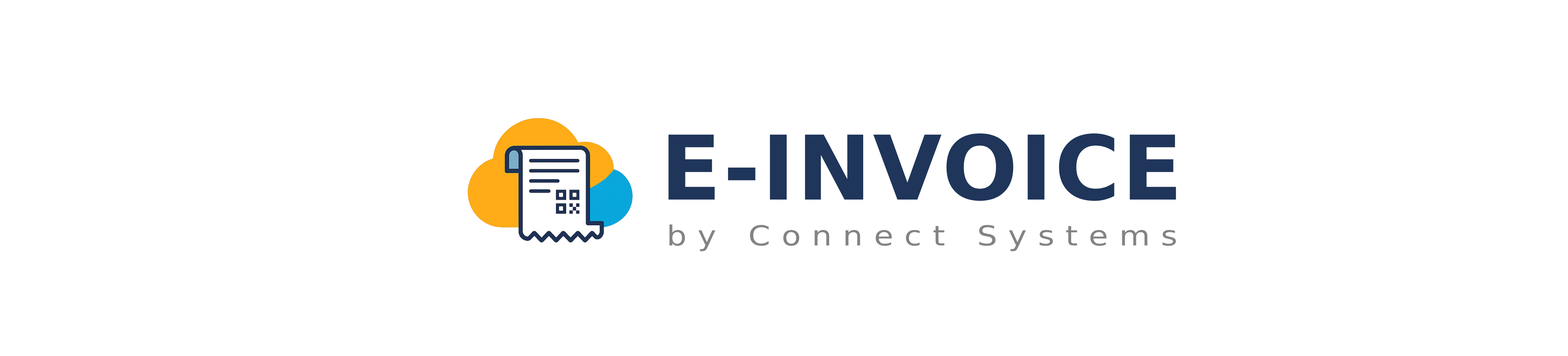
<style>
.page{position:relative;width:1568px;height:356px;background:#ffffff}
.page>*{position:absolute;margin:0}
.t1{font:89px "SourceSansRoman-Semibold";letter-spacing:0.02em;color:#1f355a}
.t2{font:27.6px "SourceSansRoman-Regular";letter-spacing:0.346em;color:#838384;scale:1.15 1}
</style>
<div class="page">
<p class="t1" style="left:668px;top:133px;width:508px;height:68px">E-INVOICE</p>
<p class="t2" style="left:669px;top:224px;width:507px;height:27px">by Connect Systems</p>
</div>
